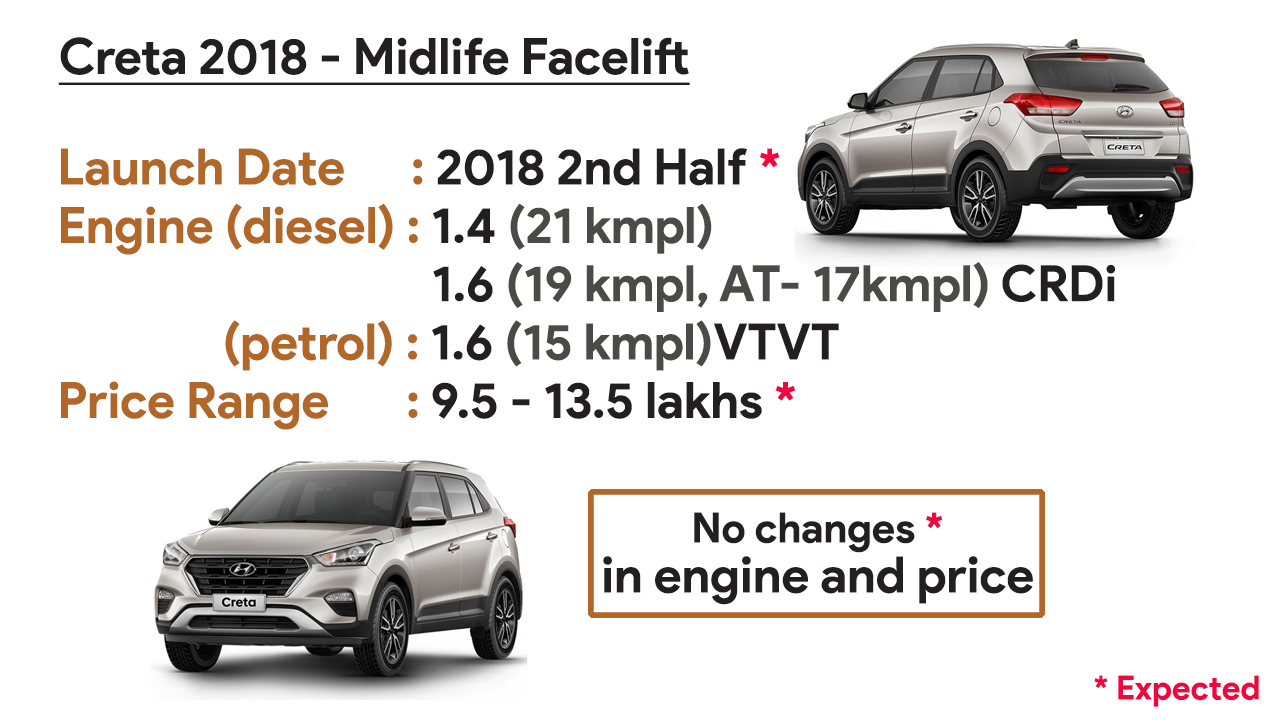
<style>
.page{position:relative;width:1280px;height:720px;background:#ffffff}
.page>*{position:absolute;margin:0}
.t1{font:12px/50px "ProductSans-Bold";color:#231f20;text-decoration:underline}
.t2{font:12px/58.3px "ProductSans-Bold";color:#4c4a48}
.t3{font:12px/58.3px "ProductSans-Bold";color:#b06727}
.t4{font:12px/58.3px "ProductSans-Bold";color:#231f20}
.t5{font:12px/58.3px "ProductSans-Bold";color:#f00741}
.t6{font:12px/50px "ProductSans-Bold";color:#231f20}
.t7{font:41.7px/50px "ProductSans-Bold";color:#231f20}
.t8{font:41.7px/50px "ProductSans-Bold";color:#f00741}
.t9{font:33.3px "ProductSans-Bold";color:#f00741}
</style>
<div class="page">
<p class="t1" style="left:58px;top:37px;width:632px;height:48px;text-align:justify">Creta 2018 - Midlife Facelift</p>
<p class="t2" style="left:61px;top:148px;width:1055px;height:282px;text-align:justify"><span class="t3">Launch Date      :</span><span class="t4"> 2018 2nd Half </span><span class="t5">*<br></span><span class="t3">Engine (diesel) : </span><span class="t4">1.4 </span>(21 kmpl) <br><span class="t4">                                  1.6 </span>(19 kmpl, AT- 17kmpl)<span class="t4"> CRDi<br></span><span class="t3">               (petrol) : </span><span class="t4">1.6 </span>(15 kmpl)<span class="t4">VTVT<br></span><span class="t3">Price Range       :</span><span class="t4"> 9.5 - 13.5 lakhs </span><span class="t5">*</span></p>
<p class="t6" style="left:603px;top:512px;width:430px;height:93px;text-align:center"><span class="t7">No changes </span><span class="t8">*<br></span>in engine and price</p>
<p class="t9" style="left:1094px;top:675px;width:165px;height:32px">* Expected</p>
</div>
